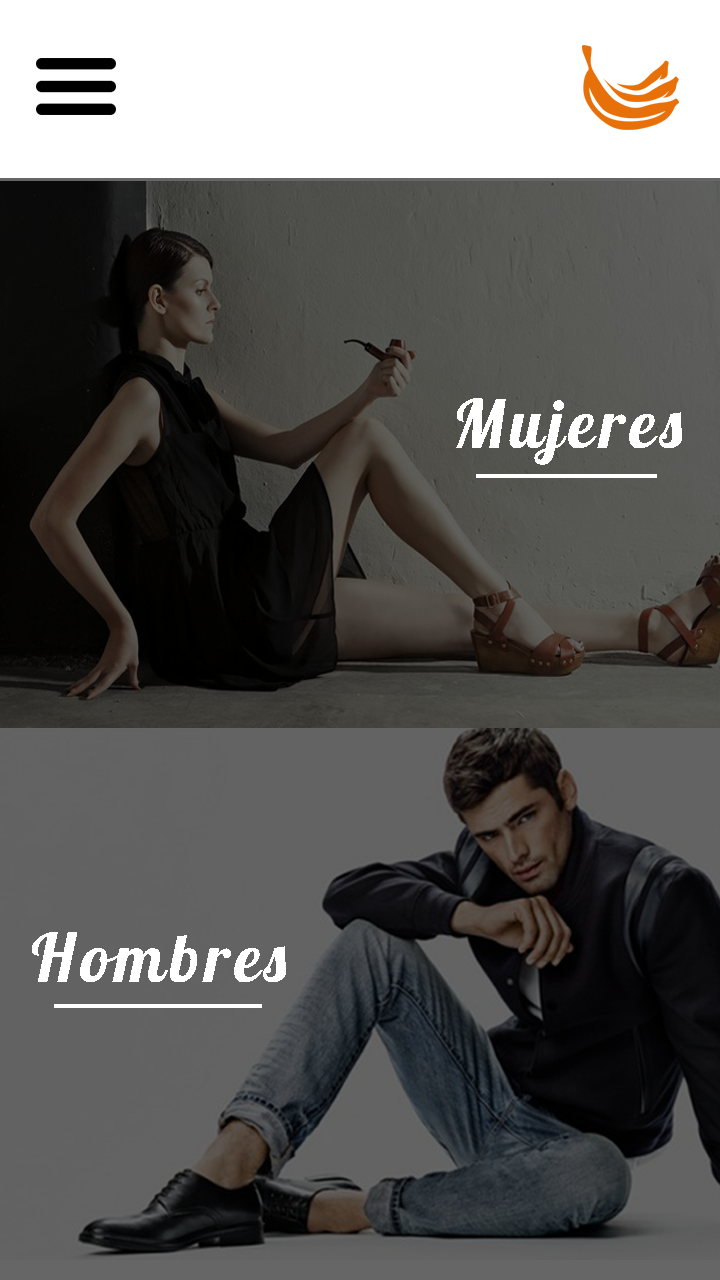
<style>
.page{position:relative;width:720px;height:1280px}
.page>*{position:absolute;margin:0}
.t1{font:66.7px "Lobster-Regular";letter-spacing:0.075em;color:#ffffff}
</style>
<div class="page">
<p class="t1" style="left:456px;top:398px;width:226px;height:67px">Mujeres</p>
<p class="t1" style="left:32px;top:932px;width:254px;height:50px">Hombres</p>
</div>
